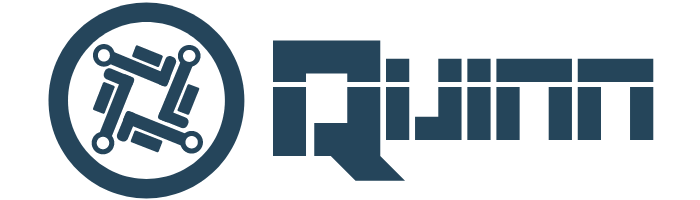
<style>
.page{position:relative;width:700px;height:200px;background:#ffffff}
.page>*{position:absolute;margin:0}
.t1{font:169px "LucidStreamsLaminar";color:#25455b}
.t2{font:119px "LucidStreamsLaminar";color:#25455a}
</style>
<div class="page">
<p class="t1" style="left:273px;top:40px;width:133px;height:141px">Q</p>
<p class="t2" style="left:386px;top:58px;width:268px;height:82px">UINN</p>
</div>
